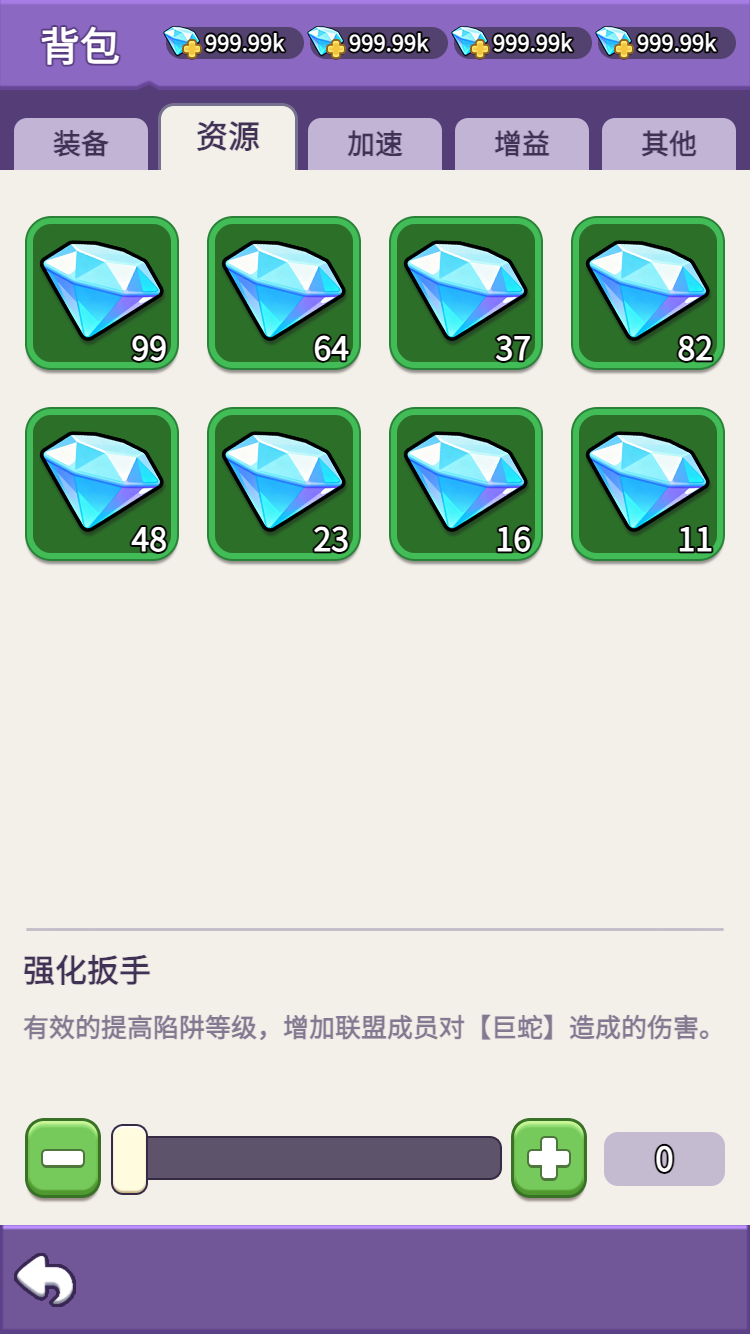
<style>
.page{position:relative;width:750px;height:1334px;background:#f3efe9}
.page>*{position:absolute;margin:0}
.t1{font:40px "WebPSD-18463539-0-Regular";color:#ffffff;font-weight:bold}
.t2{font:22px "WebPSD-18463539-0-Regular";color:#ffffff;font-weight:bold}
.t3{font:32px/32px "WebPSD-18463539-0-Regular";color:#3f3254;font-weight:bold}
.t4{font:28px/28px "WebPSD-18463539-0-Regular";color:#3f3254;font-weight:bold}
.t5{font:32px "WebPSD-18463539-0-Regular";color:#ffffff;font-weight:bold}
.t6{font:32px "WebPSD-18463539-0-Regular";color:#3f3254;font-weight:bold}
.t7{font:26px/26px "WebPSD-18463539-0-Regular";color:#837a91;font-weight:bold}
</style>
<div class="page">
<p class="t1" style="left:38px;top:16px;width:118px;height:60px">背包</p>
<p class="t2" style="left:203px;top:27px;width:101px;height:32px">999.99k</p>
<p class="t2" style="left:347px;top:27px;width:101px;height:32px">999.99k</p>
<p class="t2" style="left:491px;top:27px;width:101px;height:32px">999.99k</p>
<p class="t2" style="left:635px;top:27px;width:101px;height:32px">999.99k</p>
<p class="t3" style="left:158px;top:103px;width:140px;height:67px;text-align:center">资源</p>
<p class="t4" style="left:14px;top:118px;width:134px;height:52px;text-align:center">装备</p>
<p class="t4" style="left:308px;top:118px;width:134px;height:52px;text-align:center">加速</p>
<p class="t4" style="left:455px;top:118px;width:134px;height:52px;text-align:center">增益</p>
<p class="t4" style="left:602px;top:118px;width:134px;height:52px;text-align:center">其他</p>
<p class="t5" style="left:112px;top:327px;width:57px;height:42px">99</p>
<p class="t5" style="left:294px;top:327px;width:57px;height:42px">64</p>
<p class="t5" style="left:476px;top:327px;width:57px;height:42px">37</p>
<p class="t5" style="left:658px;top:327px;width:57px;height:42px">82</p>
<p class="t5" style="left:112px;top:518px;width:57px;height:42px">48</p>
<p class="t5" style="left:294px;top:518px;width:57px;height:42px">23</p>
<p class="t5" style="left:476px;top:518px;width:57px;height:42px">16</p>
<p class="t5" style="left:658px;top:518px;width:57px;height:42px">11</p>
<p class="t6" style="left:23px;top:946px;width:704px;height:48px">强化扳手</p>
<p class="t7" style="left:23px;top:998px;width:704px;height:58px">有效的提高陷阱等级，增加联盟成员对【巨蛇】造成的伤害。</p>
</div>
